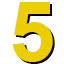
<style>
.page{position:relative;width:64px;height:64px;background:#ffffff}
.page>*{position:absolute;margin:0}
.t1{font:83.3px "Arial-BoldMT";color:#eccd00}
</style>
<div class="page">
<p class="t1" style="left:12px;top:2px;width:41px;height:60px">5</p>
</div>
